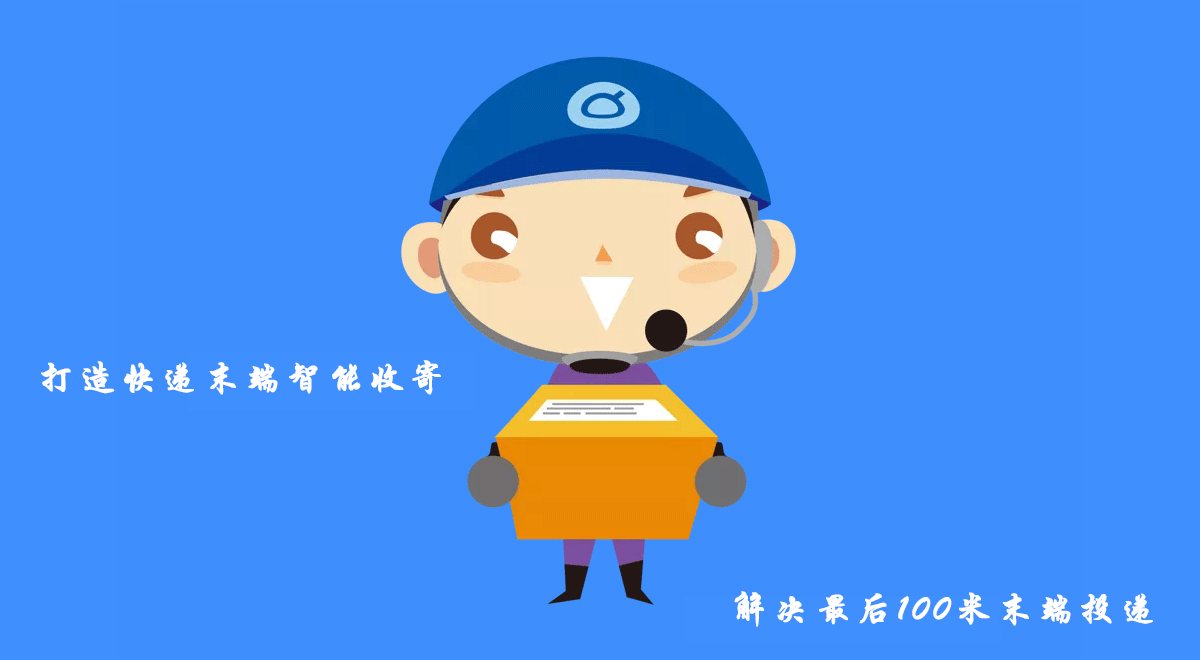
<style>
.page{position:relative;width:1200px;height:660px;background:#3f8efa}
.page>*{position:absolute;margin:0}
.t1{font:36px "STXingkai";letter-spacing:0.12em;color:#ffffff;font-weight:bold}
</style>
<div class="page">
<p class="t1" style="left:41px;top:360px;width:400px;height:35px">打造快递末端智能收寄</p>
<p class="t1" style="left:734px;top:591px;width:419px;height:36px">解决最后100米末端投递</p>
</div>
